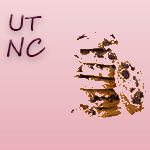
<style>
.page{position:relative;width:150px;height:150px}
.page>*{position:absolute;margin:0}
.t1{font:22px "SegoeScript";color:#4e0022}
.t2{font:24px "SegoeScript";color:#4e0022}
</style>
<div class="page">
<p class="t1" style="left:9px;top:14px;width:33px;height:17px">UT</p>
<p class="t2" style="left:6px;top:37px;width:40px;height:20px">NC</p>
</div>
